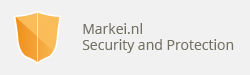
<style>
.page{position:relative;width:250px;height:75px;background:#f1f1f1}
.page>*{position:absolute;margin:0}
.t1{font:14px "OpenSans";color:#737164}
</style>
<div class="page">
<p class="t1" style="left:82px;top:23px;width:152px;height:30px">Markei.nl<br>Security and Protection</p>
</div>
